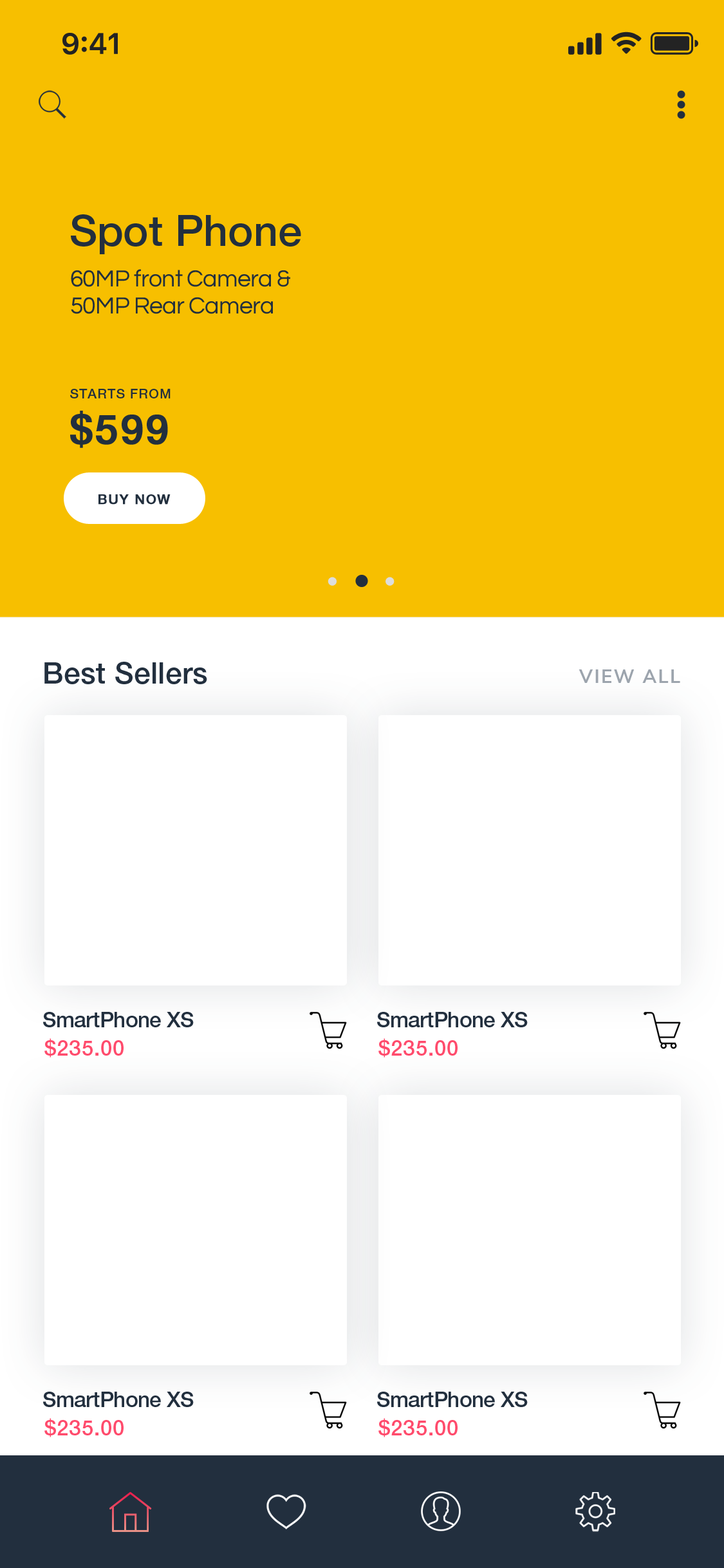
<style>
.page{position:relative;width:724px;height:1568px;background:#ffffff}
.page>*{position:absolute;margin:0}
.t1{font:42.9px "HelveticaNeue-Medium";color:#222f3e}
.t2{font:24.1px/26.8px "Questrial-Regular";letter-spacing:-0.02em;color:#222f3e}
.t3{font:13.4px "HelveticaNeue-Medium";letter-spacing:0.05em;color:#222f3e}
.t4{font:40.2px "HelveticaNeue-Medium";letter-spacing:0.05em;color:#222f3e;font-weight:bold}
.t5{font:13.4px "HelveticaNeue-Medium";letter-spacing:0.08em;color:#222f3e;font-weight:bold}
.t6{font:29.5px "HelveticaNeue-Medium";letter-spacing:0.01em;color:#222f3e}
.t7{font:18.8px "NunitoSans-Bold";letter-spacing:0.08em;color:#9ca4ad}
.t8{font:21.5px "HelveticaNeue-Medium";letter-spacing:-0.02em;color:#222f3e}
.t9{font:21.5px "HelveticaNeue-Medium";letter-spacing:0.02em;color:#ff4b6c;text-transform:uppercase}
</style>
<div class="page">
<p class="t1" style="left:71px;top:214px;width:230px;height:40px">Spot Phone</p>
<p class="t2" style="left:71px;top:269px;width:219px;height:45px">60MP front Camera &amp;<br>50MP Rear Camera</p>
<p class="t3" style="left:70px;top:389px;width:101px;height:9px">STARTS FROM</p>
<p class="t4" style="left:70px;top:411px;width:98px;height:37px">$599</p>
<p class="t5" style="left:98px;top:494px;width:73px;height:11px">BUY NOW</p>
<p class="t6" style="left:44px;top:662px;width:163px;height:22px">Best Sellers</p>
<p class="t7" style="left:579px;top:669px;width:101px;height:14px">VIEW ALL</p>
<p class="t8" style="left:43px;top:1012px;width:151px;height:15px">SmartPhone XS</p>
<p class="t8" style="left:377px;top:1012px;width:151px;height:15px">SmartPhone XS</p>
<p class="t9" style="left:44px;top:1038px;width:80px;height:20px">$235.00</p>
<p class="t9" style="left:378px;top:1038px;width:80px;height:20px">$235.00</p>
<p class="t8" style="left:43px;top:1392px;width:151px;height:15px">SmartPhone XS</p>
<p class="t8" style="left:377px;top:1392px;width:151px;height:15px">SmartPhone XS</p>
<p class="t9" style="left:44px;top:1418px;width:80px;height:19px">$235.00</p>
<p class="t9" style="left:378px;top:1418px;width:80px;height:19px">$235.00</p>
</div>
